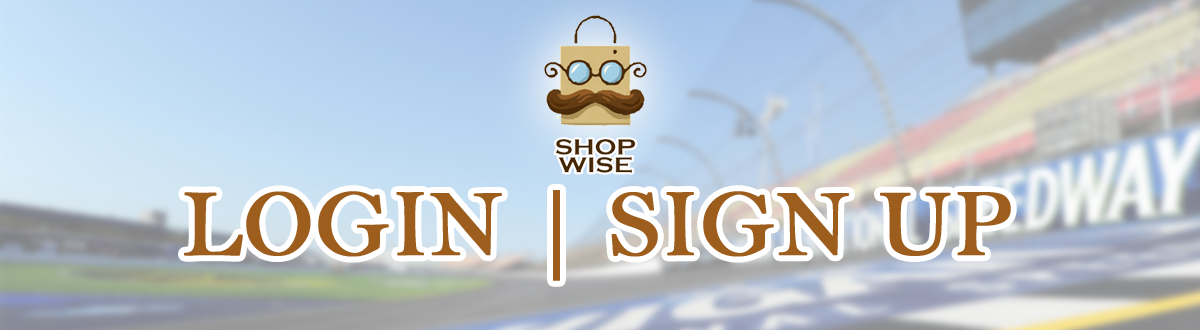
<style>
.page{position:relative;width:1200px;height:330px}
.page>*{position:absolute;margin:0}
.t1{font:96px "BellMT";color:#9c5d1d;text-transform:uppercase;font-weight:bold}
</style>
<div class="page">
<p class="t1" style="left:184px;top:190px;width:827px;height:91px">Login | Sign up</p>
</div>
